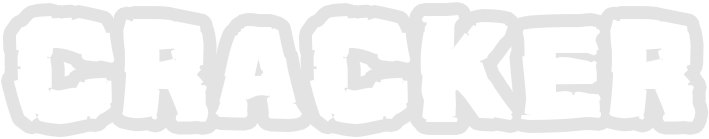
<style>
.page{position:relative;width:709px;height:139px;background:#ffffff}
.page>*{position:absolute;margin:0}
.t1{font:140px "ARDARLING";color:#ffffff;font-weight:bold}
</style>
<div class="page">
<p class="t1" style="left:13px;top:15px;width:683px;height:109px">CRACKER</p>
</div>
